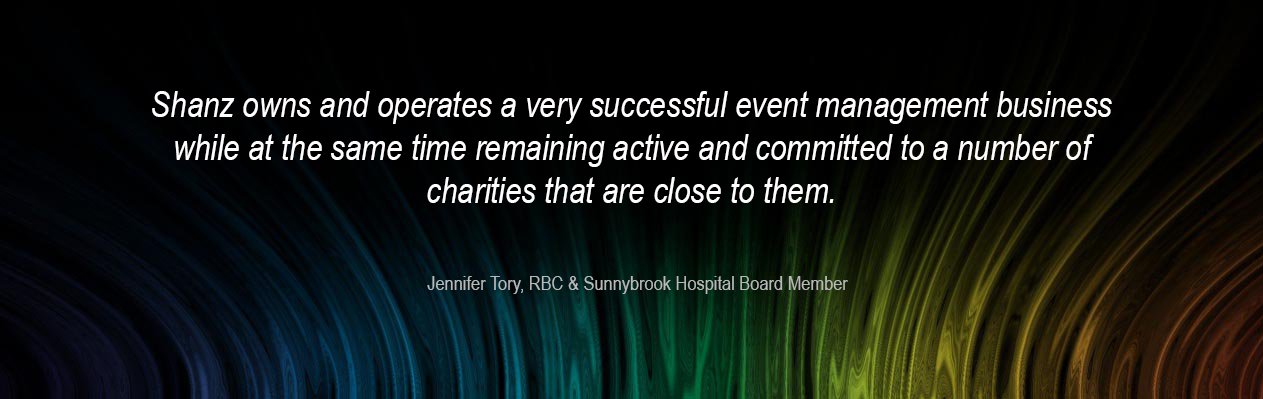
<style>
.page{position:relative;width:1263px;height:399px;background:#000000}
.page>*{position:absolute;margin:0}
.t1{font:36px "ArialNarrow-Italic";color:#fffdfd}
.t2{font:20px "ArialNarrow";color:#b9b9b9}
</style>
<div class="page">
<p class="t1" style="left:152px;top:91px;width:960px;height:203px;text-align:center">Shanz owns and operates a very successful event management business while at the same time remaining active and committed to a number of charities that are close to them.<br><br> <span class="t2">Jennifer Tory, RBC &amp; Sunnybrook Hospital Board Member</span></p>
</div>
